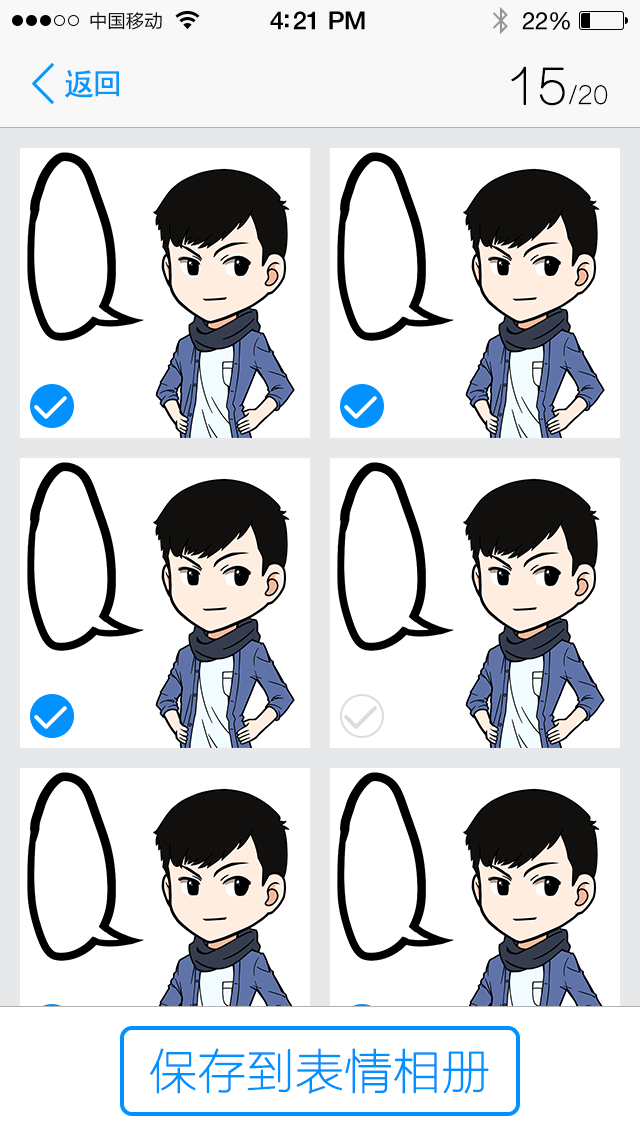
<style>
.page{position:relative;width:640px;height:1136px;background:#ffffff}
.page>*{position:absolute;margin:0}
.t1{font:30px "SimHei";letter-spacing:-0.075em;color:#0a97fb;font-weight:bold}
.t2{font:24px "FZLTCXHJW--GB1-0";letter-spacing:-0.01em;color:#000000;font-weight:bold}
.t3{font:48px "FZLTCXHJW--GB1-0";letter-spacing:-0.01em;color:#000000;font-weight:bold}
.t4{font:48px "FZLTCXHJW--GB1-0";letter-spacing:-0.01em;color:#0192ff;font-weight:bold}
</style>
<div class="page">
<p class="t1" style="left:65px;top:70px;width:54px;height:28px">返回</p>
<p class="t2" style="left:511px;top:66px;width:97px;height:40px"><span class="t3">15</span>/20</p>
<p class="t4" style="left:149px;top:1048px;width:340px;height:46px">保存到表情相册</p>
</div>
